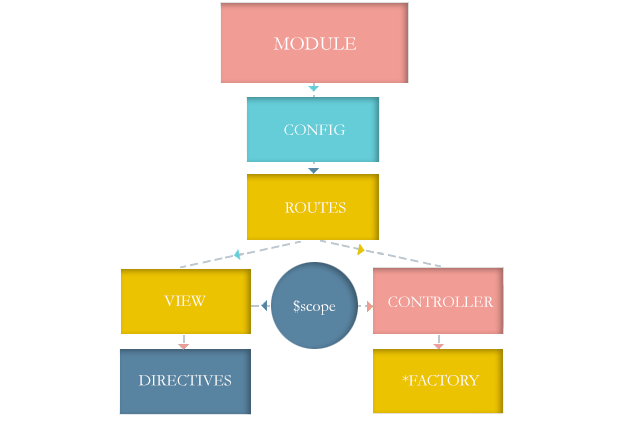
<style>
.page{position:relative;width:629px;height:425px;background:#ffffff}
.page>*{position:absolute;margin:0}
.t1{font:19.2px "Garamond";color:#ffffff}
.t2{font:16px "Garamond";color:#ffffff}
</style>
<div class="page">
<p class="t1" style="left:273px;top:37px;width:84px;height:13px">MODULE</p>
<p class="t2" style="left:284px;top:124px;width:62px;height:11px">CONFIG</p>
<p class="t2" style="left:285px;top:201px;width:61px;height:12px">ROUTES</p>
<p class="t2" style="left:164px;top:295px;width:42px;height:11px">VIEW</p>
<p class="t2" style="left:293px;top:300px;width:43px;height:15px">$scope</p>
<p class="t2" style="left:388px;top:296px;width:106px;height:11px">CONTROLLER</p>
<p class="t2" style="left:138px;top:374px;width:93px;height:12px">DIRECTIVES</p>
<p class="t2" style="left:402px;top:374px;width:78px;height:12px">*FACTORY</p>
</div>
